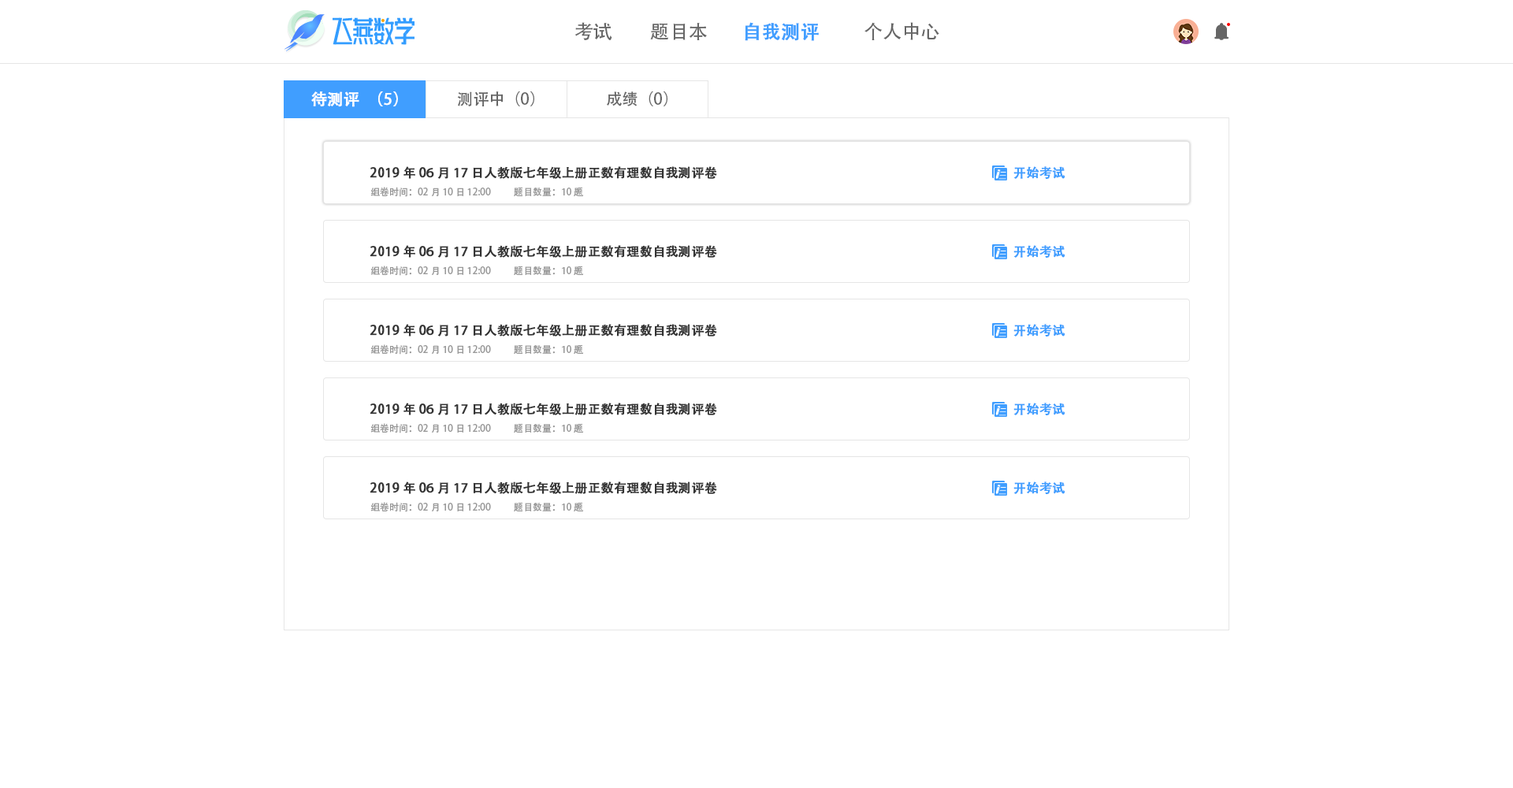
<style>
.page{position:relative;width:1513px;height:788px;background:#ffffff}
.page>*{position:absolute;margin:0}
.t1{font:18.9px "AdobeHeitiStd-Regular";color:#666666}
.t2{font:18.9px "AdobeHeitiStd-Regular";color:#409eff;font-weight:bold}
.t3{font:15.8px "AdobeHeitiStd-Regular";color:#ffffff;font-weight:bold}
.t4{font:15.8px "AdobeHeitiStd-Regular";color:#666666}
.t5{font:12.6px "AdobeHeitiStd-Regular";color:#333333;font-weight:bold}
.t6{font:12.6px "AdobeHeitiStd-Regular";color:#409eff;font-weight:bold}
.t7{font:9.5px "AdobeHeitiStd-Regular";color:#999999}
</style>
<div class="page">
<p class="t1" style="left:575px;top:22px;width:37px;height:18px">考试</p>
<p class="t1" style="left:650px;top:23px;width:57px;height:17px">题目本</p>
<p class="t2" style="left:745px;top:22px;width:74px;height:19px">自我测评</p>
<p class="t1" style="left:865px;top:22px;width:74px;height:18px">个人中心</p>
<p class="t3" style="left:311px;top:91px;width:87px;height:16px">待测评（5）</p>
<p class="t4" style="left:458px;top:91px;width:76px;height:15px">测评中（0）</p>
<p class="t4" style="left:607px;top:91px;width:60px;height:15px">成绩（0）</p>
<p class="t5" style="left:370px;top:166px;width:347px;height:13px">2019年06月17日人教版七年级上册正数有理数自我测评卷</p>
<p class="t6" style="left:1013px;top:166px;width:52px;height:14px">开始考试</p>
<p class="t7" style="left:370px;top:187px;width:121px;height:10px">组卷时间：02月10日 12:00</p>
<p class="t7" style="left:514px;top:187px;width:70px;height:9px">题目数量：10题</p>
<p class="t5" style="left:370px;top:245px;width:347px;height:13px">2019年06月17日人教版七年级上册正数有理数自我测评卷</p>
<p class="t6" style="left:1013px;top:245px;width:52px;height:13px">开始考试</p>
<p class="t7" style="left:370px;top:266px;width:121px;height:10px">组卷时间：02月10日 12:00</p>
<p class="t7" style="left:514px;top:266px;width:70px;height:9px">题目数量：10题</p>
<p class="t5" style="left:370px;top:324px;width:347px;height:13px">2019年06月17日人教版七年级上册正数有理数自我测评卷</p>
<p class="t6" style="left:1013px;top:324px;width:52px;height:13px">开始考试</p>
<p class="t7" style="left:370px;top:344px;width:121px;height:11px">组卷时间：02月10日 12:00</p>
<p class="t7" style="left:514px;top:344px;width:70px;height:10px">题目数量：10题</p>
<p class="t5" style="left:370px;top:403px;width:347px;height:12px">2019年06月17日人教版七年级上册正数有理数自我测评卷</p>
<p class="t6" style="left:1013px;top:403px;width:52px;height:13px">开始考试</p>
<p class="t7" style="left:370px;top:423px;width:121px;height:10px">组卷时间：02月10日 12:00</p>
<p class="t7" style="left:514px;top:423px;width:70px;height:10px">题目数量：10题</p>
<p class="t5" style="left:370px;top:482px;width:347px;height:12px">2019年06月17日人教版七年级上册正数有理数自我测评卷</p>
<p class="t6" style="left:1013px;top:482px;width:52px;height:13px">开始考试</p>
<p class="t7" style="left:370px;top:502px;width:121px;height:10px">组卷时间：02月10日 12:00</p>
<p class="t7" style="left:514px;top:502px;width:70px;height:9px">题目数量：10题</p>
</div>
